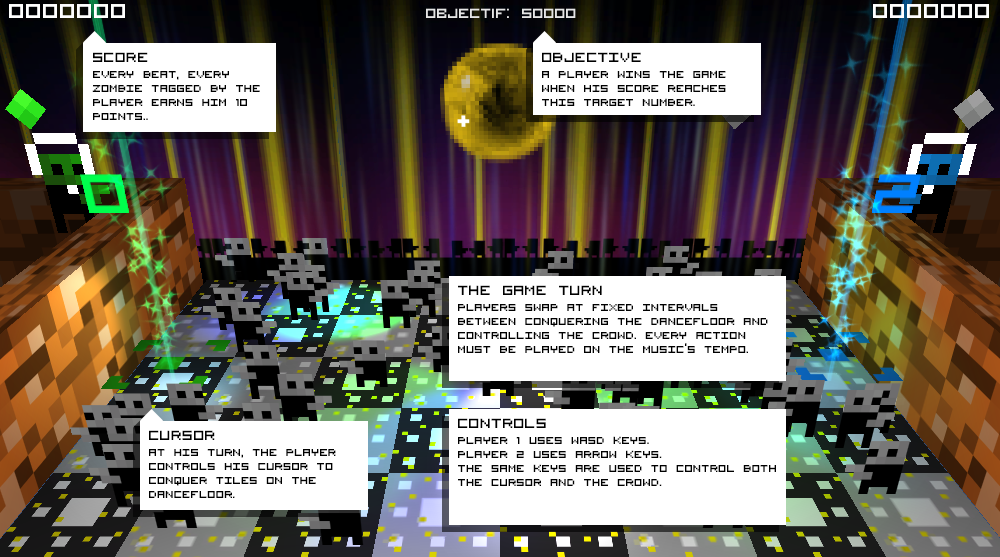
<style>
.page{position:relative;width:1000px;height:557px}
.page>*{position:absolute;margin:0}
.t1{font:24px "VisitorTT2BRK";color:#000000;text-transform:uppercase}
.t2{font:18px/14px "VisitorTT2BRK";color:#000000;text-transform:uppercase}
</style>
<div class="page">
<p class="t1" style="left:93px;top:52px;width:55px;height:10px">Score</p>
<p class="t1" style="left:542px;top:52px;width:99px;height:10px">Objective</p>
<p class="t2" style="left:92px;top:71px;width:168px;height:49px">every beat, every zombie tagged by the player earns him 10 points..</p>
<p class="t2" style="left:542px;top:70px;width:184px;height:36px">a player wins the game when his score reaches this target number.</p>
<p class="t1" style="left:458px;top:285px;width:144px;height:10px">the game turn</p>
<p class="t2" style="left:458px;top:304px;width:310px;height:49px">players swap at fixed intervals between conquering the dancefloor and controlling the crowd. every action must be played on the music’s tempo.</p>
<p class="t1" style="left:458px;top:418px;width:88px;height:10px">Controls</p>
<p class="t1" style="left:149px;top:430px;width:66px;height:10px">Cursor</p>
<p class="t2" style="left:458px;top:436px;width:318px;height:50px">player 1 uses wasd keys.<br>player 2 uses arrow keys.<br>the same keys are used to control both the cursor and the crowd.</p>
<p class="t2" style="left:149px;top:449px;width:187px;height:49px">at his turn, the player controls his cursor to conquer tiles on the dancefloor.</p>
</div>
